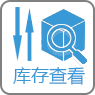
<style>
.page{position:relative;width:95px;height:95px;background:#ffffff}
.page>*{position:absolute;margin:0}
.t1{font:18px "MicrosoftYaHei";color:#3998d6}
</style>
<div class="page">
<p class="t1" style="left:13px;top:67px;width:72px;height:18px">库存查看</p>
</div>
